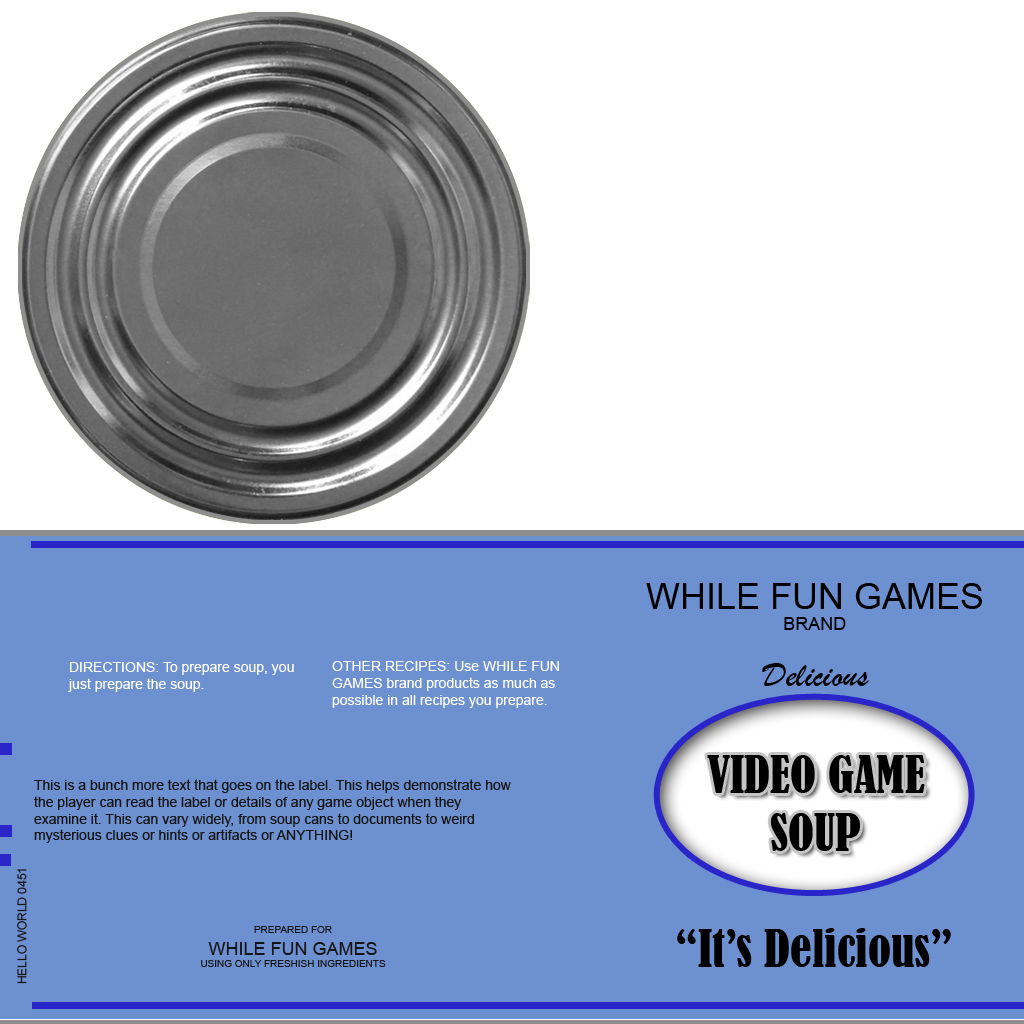
<style>
.page{position:relative;width:1024px;height:1024px;background:#6d90d1}
.page>*{position:absolute;margin:0}
.t1{font:36px "ArialMT";color:#000000}
.t2{font:18px "ArialMT";color:#000000}
.t3{font:14px "ArialMT";color:#ffffff}
.t4{font:36px "BrushScriptMT";color:#000000}
.t5{font:48px "BernardMT-Condensed";color:#000000}
.t6{font:14px "ArialMT";color:#151515}
.t7{font:12px "ArialMT";color:#151515}
.t8{font:10px "ArialMT";color:#151515}
.t9{font:18px "ArialMT";color:#151515}
</style>
<div class="page">
<p class="t1" style="left:646px;top:583px;width:336px;height:47px;text-align:center">WHILE FUN GAMES<br><span class="t2">BRAND</span></p>
<p class="t3" style="left:68px;top:662px;width:226px;height:30px">DIRECTIONS: To prepare soup, you<br>just prepare the soup.</p>
<p class="t3" style="left:332px;top:661px;width:227px;height:47px">OTHER RECIPES: Use WHILE FUN<br>GAMES brand products as much as <br>possible in all recipes you prepare.</p>
<p class="t4" style="left:762px;top:663px;width:107px;height:23px">Delicious</p>
<p class="t5" style="left:707px;top:755px;width:218px;height:96px;text-align:center">VIDEO GAME<br>SOUP</p>
<p class="t6" style="left:34px;top:779px;width:477px;height:64px">This is a bunch more text that goes on the label. This helps demonstrate how<br>the player can read the label or details of any game object when they<br>examine it. This can vary widely, from soup cans to documents to weird<br>mysterious clues or hints or artifacts or ANYTHING!</p>
<p class="t7" style="left:17px;top:869px;width:10px;height:115px;rotate:-90deg">HELLO WORLD 0451</p>
<p class="t8" style="left:201px;top:926px;width:185px;height:41px;text-align:center">PREPARED FOR<br><span class="t9">WHILE FUN GAMES<br></span>USING ONLY FRESHISH INGREDIENTS</p>
<p class="t5" style="left:677px;top:928px;width:274px;height:39px">“It’s Delicious”</p>
</div>
